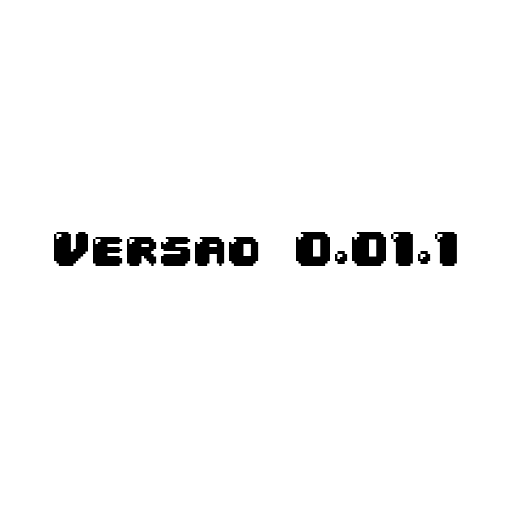
<style>
.page{position:relative;width:512px;height:512px;background:#ffffff}
.page>*{position:absolute;margin:0}
.t1{font:41.2px "04b30";color:#000000}
</style>
<div class="page">
<p class="t1" style="left:54px;top:232px;width:403px;height:34px">Versao 0.01.1</p>
</div>
